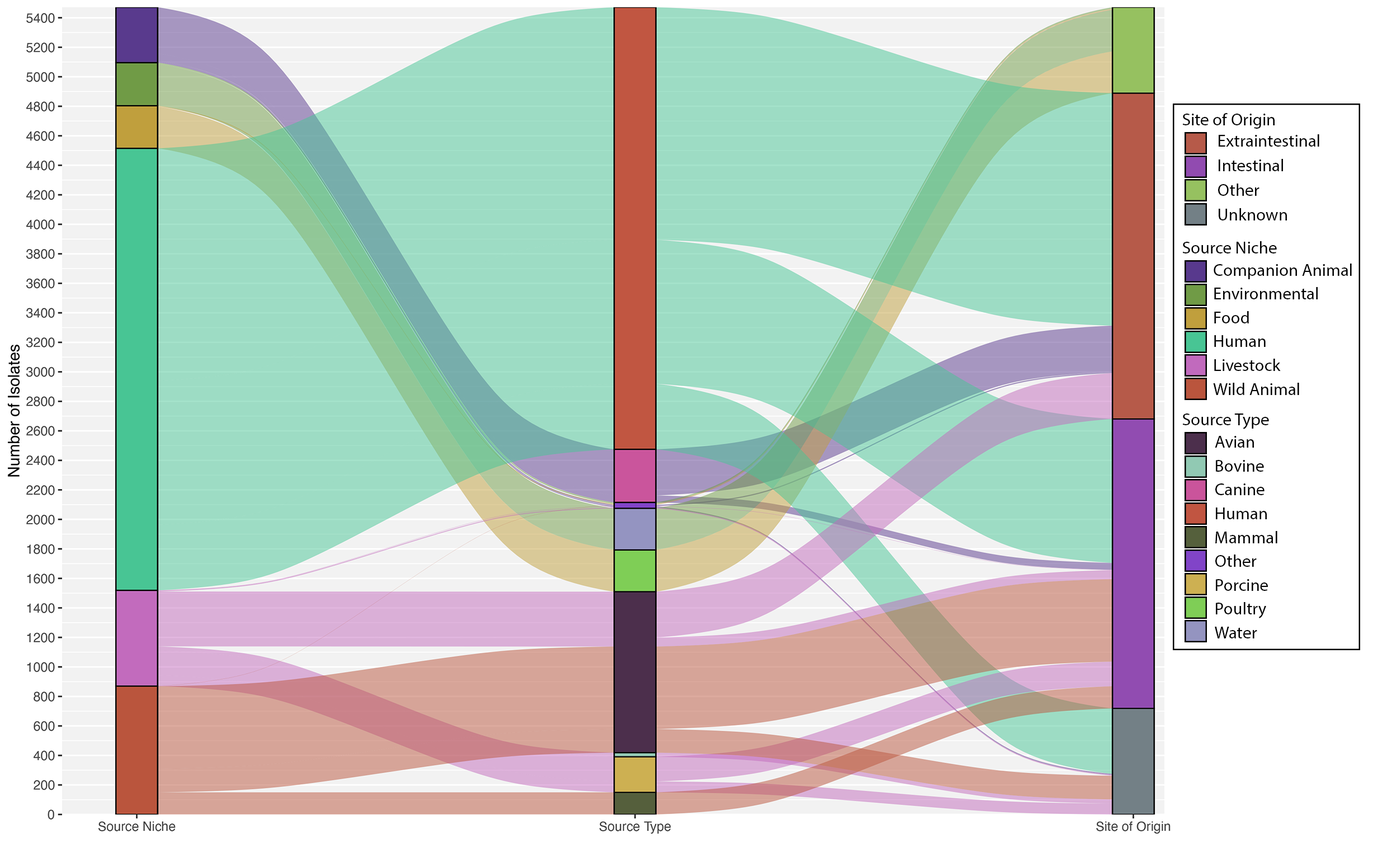
<style>
.page{position:relative;width:1387px;height:860px;background:#ffffff}
.page>*{position:absolute;margin:0}
.t1{font:17.3px "MyriadPro-Regular";color:#000000}
.t2{font:17.3px/24.6px "MyriadPro-Regular";color:#000000}
.t3{font:17.3px/23.8px "MyriadPro-Regular";color:#000000}
</style>
<div class="page">
<p class="t1" style="left:1182px;top:113px;width:93px;height:16px">Site of Origin</p>
<p class="t2" style="left:1218px;top:134px;width:101px;height:86px">Extraintestinal<br>Intestinal<br>Other<br>Unknown</p>
<p class="t1" style="left:1182px;top:241px;width:95px;height:12px">Source Niche</p>
<p class="t3" style="left:1213px;top:263px;width:139px;height:132px">Companion Animal<br>Environmental<br>Food<br>Human<br>Livestock<br>Wild Animal</p>
<p class="t1" style="left:1182px;top:413px;width:87px;height:16px">Source Type</p>
<p class="t3" style="left:1215px;top:436px;width:62px;height:202px">Avian<br>Bovine<br>Canine<br>Human<br>Mammal<br>Other<br>Porcine<br>Poultry<br>Water</p>
</div>
